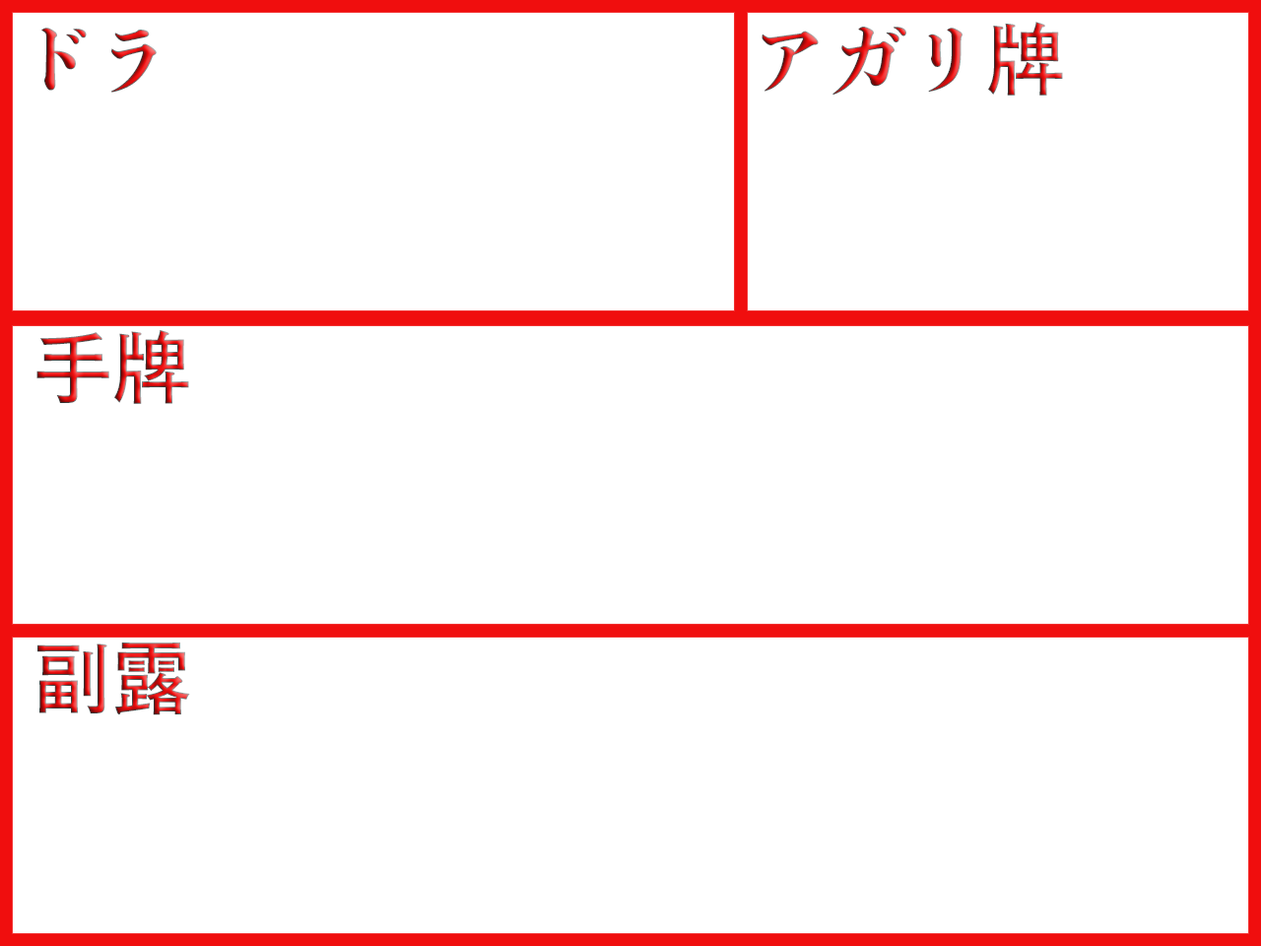
<style>
.page{position:relative;width:1261px;height:946px;background:#ffffff}
.page>*{position:absolute;margin:0}
.t1{font:78.8px "ToppanBunkyuMidashiMinchoStdN-ExtraBold"}
.t2{font:78.8px "ToppanBunkyuGothicPr6N-DB"}
</style>
<div class="page">
<p class="t1" style="left:41px;top:28px;width:116px;height:65px">ドラ</p>
<p class="t1" style="left:761px;top:22px;width:302px;height:74px">アガリ<span class="t2">牌</span></p>
<p class="t2" style="left:36px;top:330px;width:153px;height:74px">手牌</p>
<p class="t2" style="left:37px;top:642px;width:153px;height:73px">副露</p>
</div>
